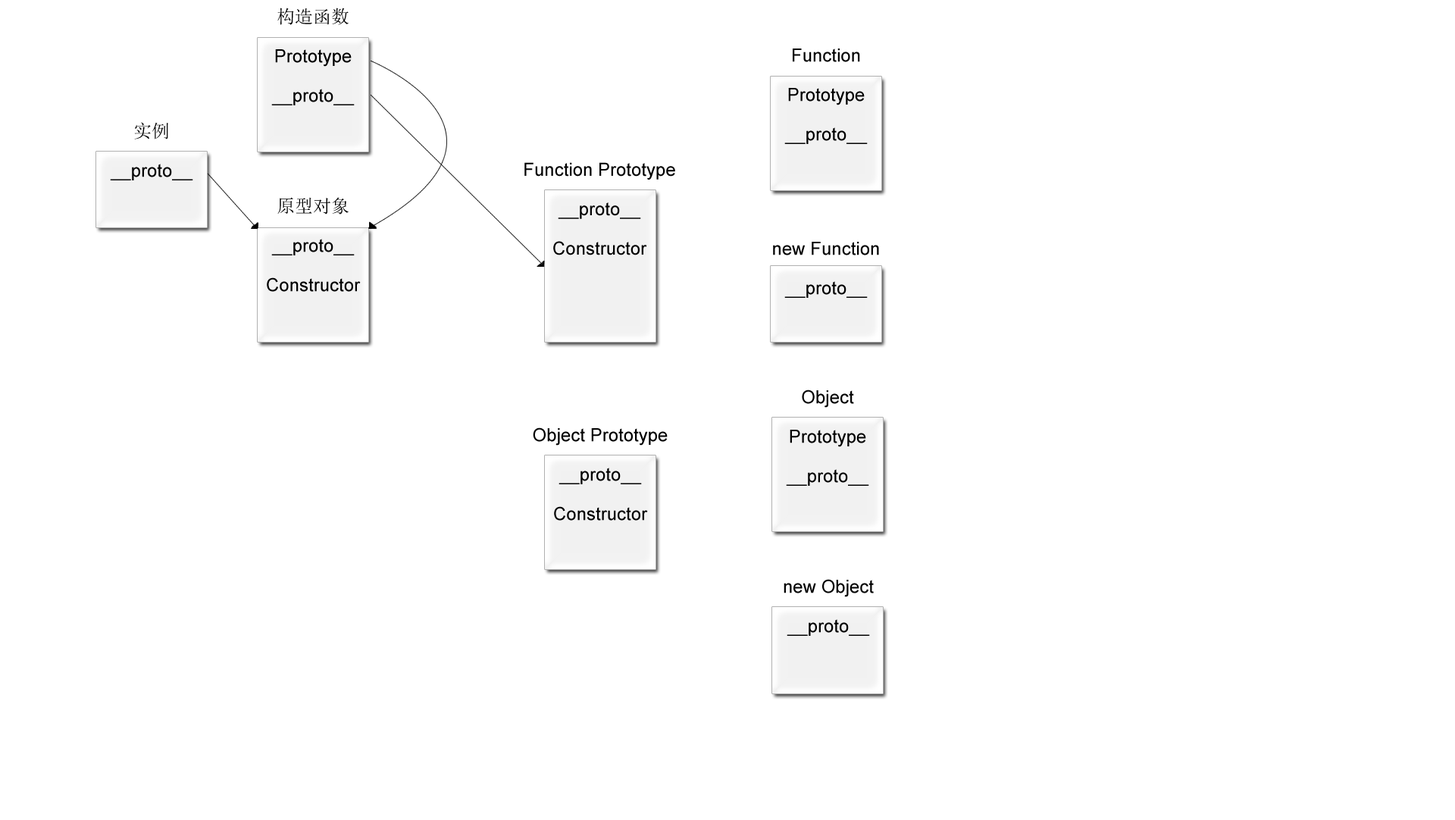
<style>
.page{position:relative;width:1455px;height:820px;background:#ffffff}
.page>*{position:absolute;margin:0}
.t1{font:18.2px/39.4px "ArialMT";color:#000000}
.t2{font:18.2px/39.4px "SimSun";color:#000000}
</style>
<div class="page">
<p class="t1" style="left:271px;top:8px;width:84px;height:97px;text-align:center"><span class="t2">构造函数</span><br>Prototype<br>__proto__</p>
<p class="t1" style="left:784px;top:48px;width:83px;height:96px;text-align:center">Function<br>Prototype<br>__proto__</p>
<p class="t1" style="left:110px;top:122px;width:83px;height:58px;text-align:center"><span class="t2">实例<br></span>__proto__</p>
<p class="t1" style="left:524px;top:162px;width:151px;height:93px;text-align:center">Function Prototype<br>__proto__<br>Constructor</p>
<p class="t1" style="left:267px;top:197px;width:94px;height:95px;text-align:center"><span class="t2">原型对象</span><br>__proto__<br>Constructor</p>
<p class="t1" style="left:773px;top:242px;width:106px;height:56px;text-align:center">new Function<br>__proto__</p>
<p class="t1" style="left:786px;top:389px;width:83px;height:97px;text-align:center">Object<br>Prototype<br>__proto__</p>
<p class="t1" style="left:533px;top:427px;width:134px;height:93px;text-align:center">Object Prototype<br>__proto__<br>Constructor</p>
<p class="t1" style="left:783px;top:579px;width:91px;height:57px;text-align:center">new Object<br>__proto__</p>
</div>
